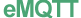
<style>
.page{position:relative;width:81px;height:18px;background:#ffffff}
.page>*{position:absolute;margin:0}
.t1{font:24px "Arial-BoldMT";letter-spacing:-0.05em;color:#4ba575}
</style>
<div class="page">
<p class="t1" style="left:3px;top:0px;width:76px;height:19px">eMQTT</p>
</div>
